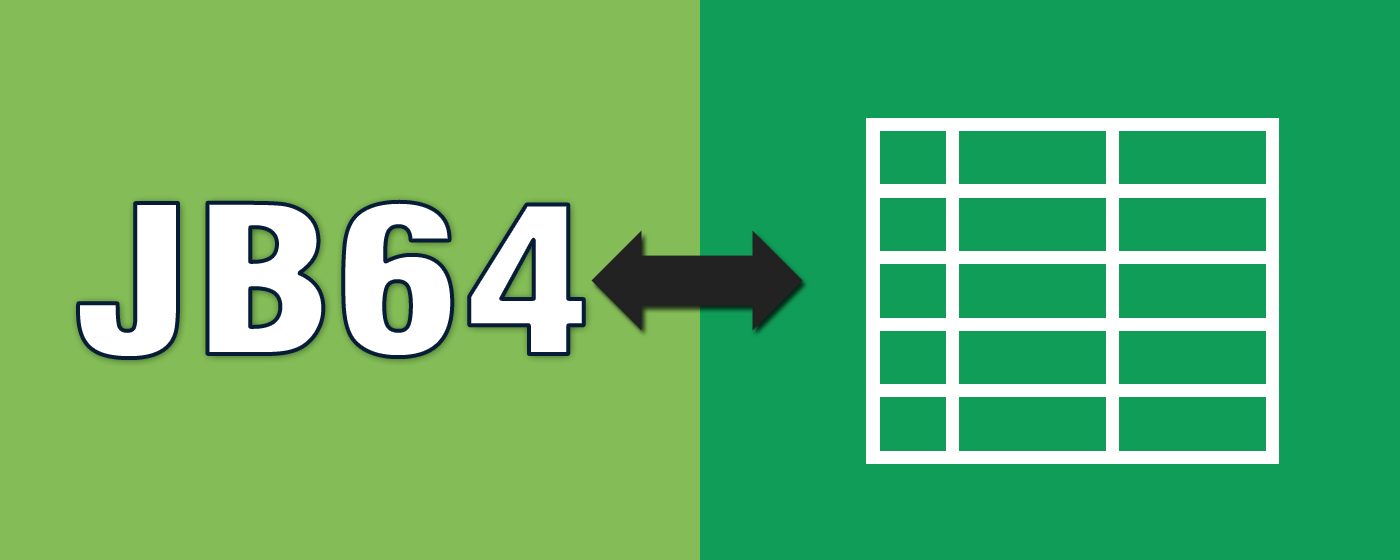
<style>
.page{position:relative;width:1400px;height:560px;background:#0f9d58}
.page>*{position:absolute;margin:0}
.t1{font:201px "Swiss721BT-BlackCondensed";color:#ffffff;scale:1.2 1}
</style>
<div class="page">
<p class="t1" style="left:78px;top:201px;width:506px;height:157px">JB64</p>
</div>
